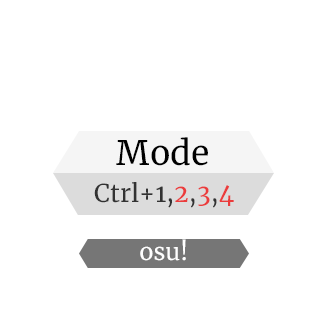
<style>
.page{position:relative;width:328px;height:327px;background:#ffffff}
.page>*{position:absolute;margin:0}
.t1{font:33.6px "Merriweather-Regular";color:#000000}
.t2{font:24.3px "Merriweather-Regular";color:#323232}
.t3{font:24.3px "Merriweather-Regular";color:#eb3c3c}
.t4{font:23.2px "Merriweather-Regular";color:#ffffff}
</style>
<div class="page">
<p class="t1" style="left:116px;top:137px;width:92px;height:29px">Mode</p>
<p class="t2" style="left:94px;top:182px;width:140px;height:26px">Ctrl+1,<span class="t3">2</span>,<span class="t3">3</span>,<span class="t3">4</span></p>
<p class="t4" style="left:140px;top:239px;width:46px;height:22px">osu!</p>
</div>
